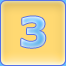
<style>
.page{position:relative;width:66px;height:66px}
.page>*{position:absolute;margin:0}
.t1{font:41px "Tahoma-Bold"}
</style>
<div class="page">
<p class="t1" style="left:21px;top:16px;width:25px;height:32px">З</p>
<p class="t1" style="left:21px;top:16px;width:25px;height:32px">З</p>
</div>
